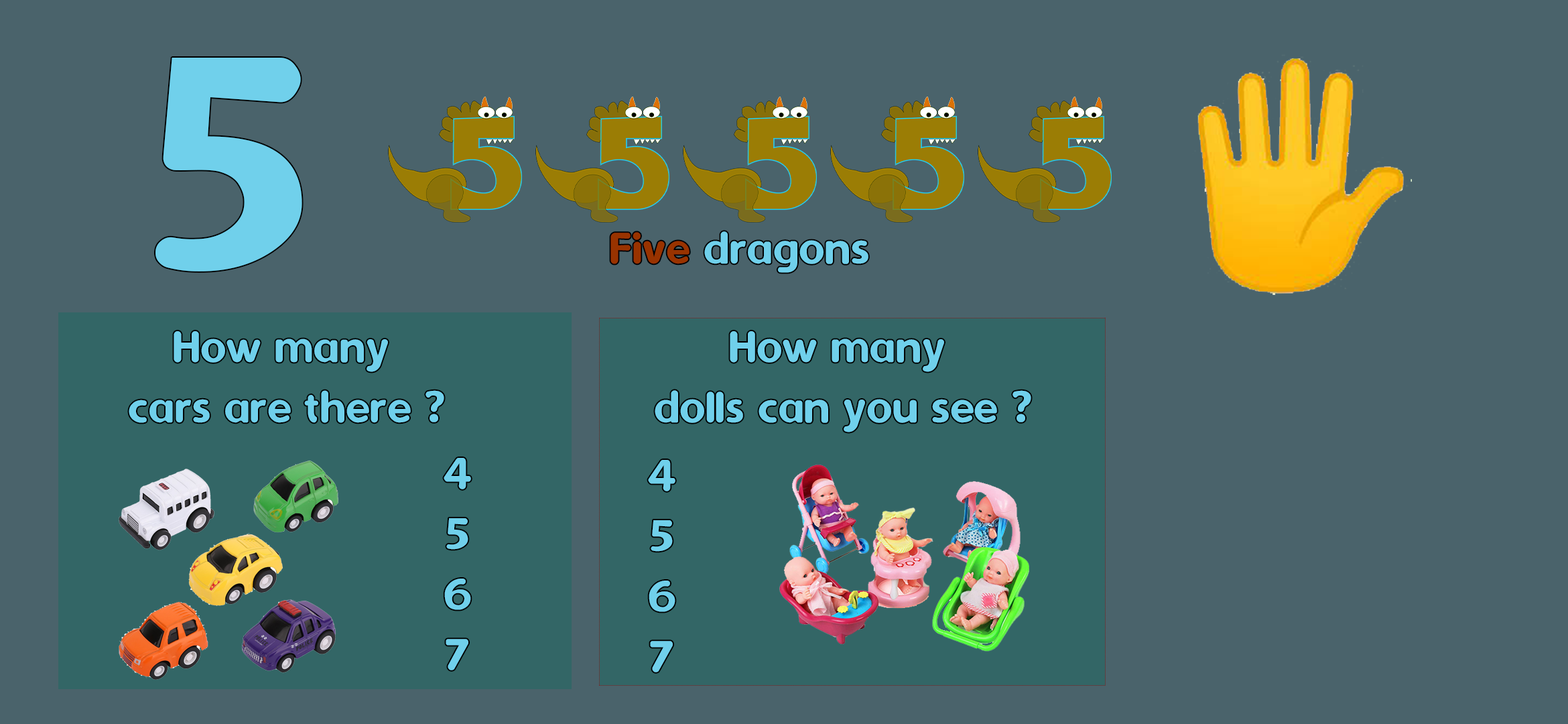
<style>
.page{position:relative;width:1568px;height:724px;background:#4a636b}
.page>*{position:absolute;margin:0}
.t1{font:345.7px "Dyuthi";color:#70d0eb}
.t2{font:50.3px "Dyuthi";color:#70d0eb}
.t3{font:50.3px "Dyuthi";color:#993300}
</style>
<div class="page">
<p class="t1" style="left:155px;top:58px;width:147px;height:213px">5</p>
<p class="t2" style="left:610px;top:231px;width:258px;height:42px"><span class="t3">Five </span>dragons</p>
<p class="t2" style="left:129px;top:331px;width:315px;height:92px;text-align:center">How many <br>cars are there ?</p>
<p class="t2" style="left:655px;top:331px;width:376px;height:101px;text-align:center">How many <br>dolls can you see ?</p>
<p class="t2" style="left:444px;top:458px;width:27px;height:212px;text-align:center">4<br>5<br>6<br>7</p>
<p class="t2" style="left:648px;top:460px;width:27px;height:212px;text-align:center">4<br>5<br>6<br>7</p>
</div>
